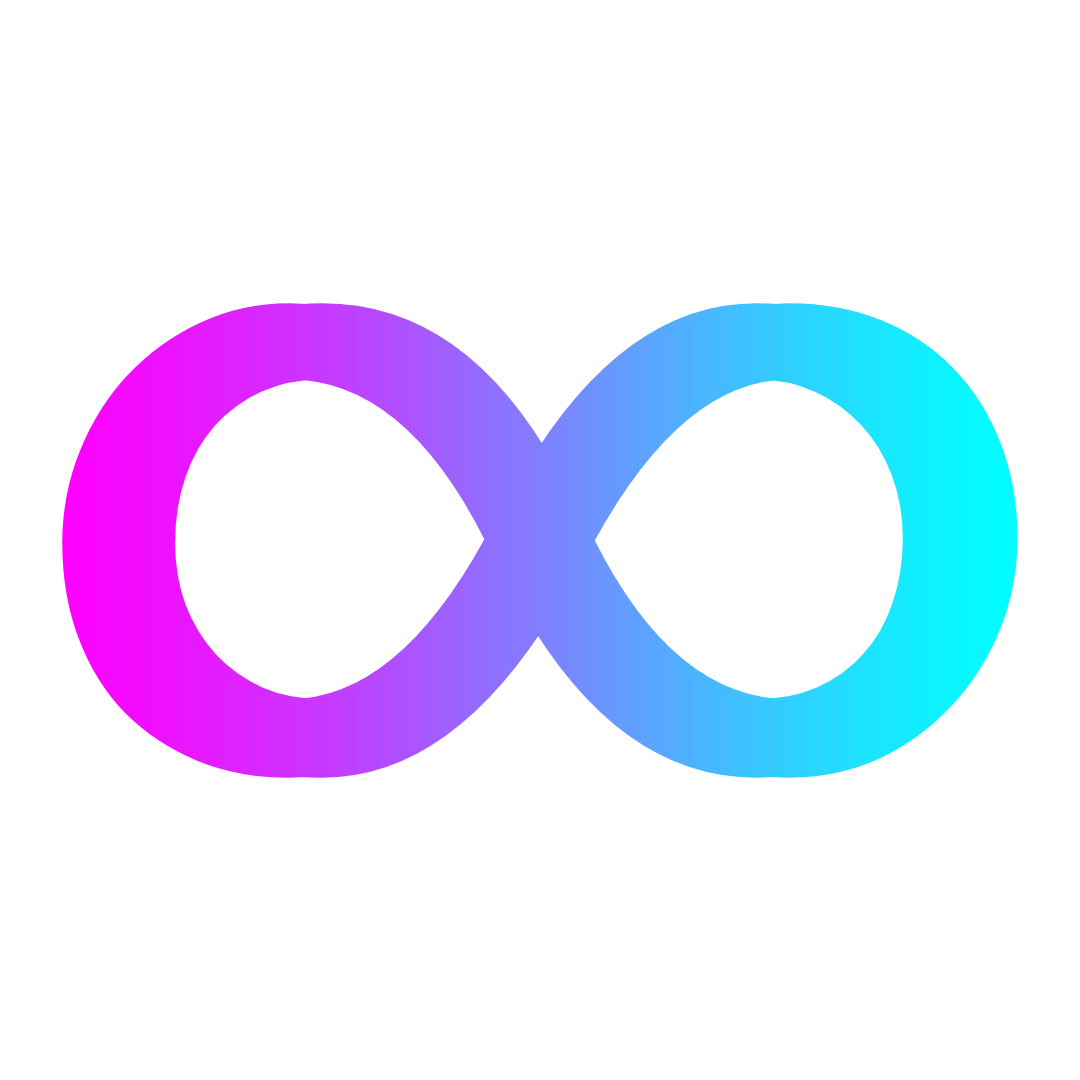
<style>
.page{position:relative;width:1080px;height:1080px;background:#ffffff}
.page>*{position:absolute;margin:0}
.t1{font:1249.2px "SegoeUISymbol";font-weight:bold}
</style>
<div class="page">
<p class="t1" style="left:62px;top:303px;width:956px;height:475px">∞</p>
</div>
